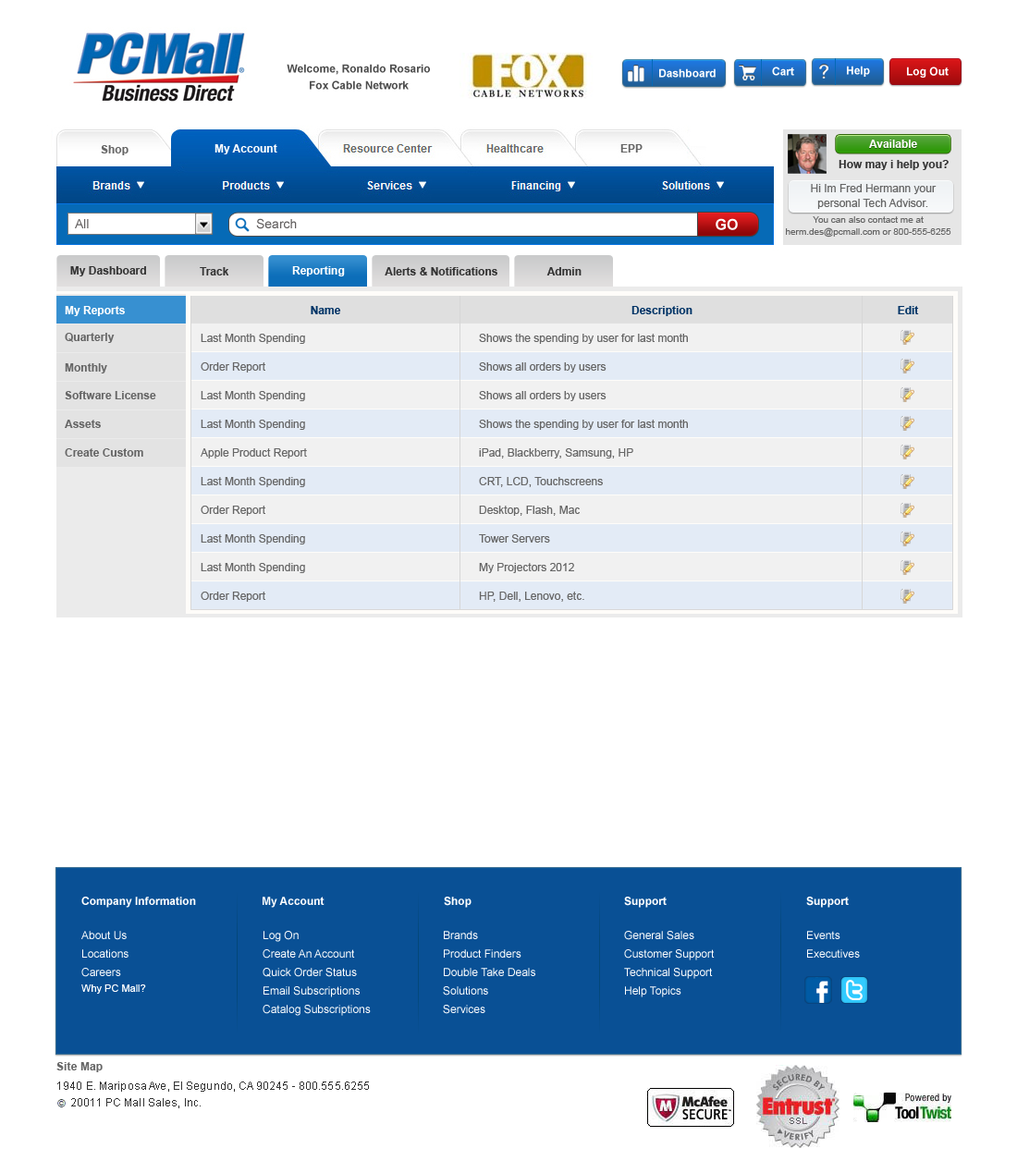
<style>
.page{position:relative;width:1017px;height:1173px;background:#ffffff}
.page>*{position:absolute;margin:0}
.t1{font:11.1px/16.6px "Arial-BoldMT";color:#4e4e4e}
.t2{font:11.1px "Arial-BoldMT";color:#feffff}
.t3{font:11.1px "Arial-BoldMT";color:#fffefe}
.t4{font:11.1px "Arial-BoldMT";color:#333333}
.t5{font:11.1px/14.8px "ArialMT";color:#666666}
.t6{font:12.9px "ArialMT";color:#625f5f}
.t7{font:14.8px "Arial-BoldMT";color:#ffffff}
.t8{font:9.2px/12px "ArialMT";color:#666666}
.t9{font:11.1px "Arial-BoldMT";color:#ffffff}
.t10{font:11.1px "Arial-BoldMT";color:#003366}
.t11{font:11.1px "ArialMT";color:#666666}
.t12{font:11.1px/18.5px "ArialMT";color:#ffffff}
.t13{font:10.2px "ArialMT";color:#ffffff}
.t14{font:11.1px "Arial-BoldMT";letter-spacing:0.01em;color:#666666}
.t15{font:11.1px "ArialMT";letter-spacing:0.01em;color:#333333}
</style>
<div class="page">
<p class="t1" style="left:287px;top:64px;width:143px;height:26px;text-align:center">Welcome, Ronaldo Rosario <br>Fox Cable Network</p>
<p class="t2" style="left:847px;top:66px;width:23px;height:11px">Help</p>
<p class="t2" style="left:659px;top:68px;width:56px;height:10px">Dashboard</p>
<p class="t2" style="left:772px;top:67px;width:22px;height:9px">Cart</p>
<p class="t2" style="left:907px;top:67px;width:41px;height:11px">Log Out</p>
<p class="t3" style="left:869px;top:140px;width:48px;height:8px">Available</p>
<p class="t4" style="left:838px;top:160px;width:110px;height:10px">How may i help you?</p>
<p class="t5" style="left:811px;top:184px;width:125px;height:25px;text-align:center">Hi Im Fred Hermann your personal Tech Advisor.</p>
<p class="t6" style="left:75px;top:219px;width:14px;height:9px">All</p>
<p class="t6" style="left:256px;top:218px;width:41px;height:11px">Search</p>
<p class="t7" style="left:715px;top:218px;width:23px;height:12px">GOv</p>
<p class="t8" style="left:786px;top:216px;width:165px;height:22px;text-align:center">You can also contact me at herm.des@pcmall.com or 800-555-6255</p>
<p class="t4" style="left:70px;top:266px;width:76px;height:10px">My Dashboard</p>
<p class="t4" style="left:200px;top:267px;width:29px;height:8px">Track</p>
<p class="t9" style="left:292px;top:266px;width:53px;height:10px">Reporting</p>
<p class="t4" style="left:384px;top:267px;width:113px;height:8px">Alerts &amp; Notifications</p>
<p class="t4" style="left:546px;top:267px;width:35px;height:8px">Admin</p>
<p class="t10" style="left:311px;top:306px;width:30px;height:8px">Name</p>
<p class="t10" style="left:631px;top:306px;width:61px;height:10px">Description</p>
<p class="t10" style="left:897px;top:306px;width:22px;height:8px">Edit</p>
<p class="t11" style="left:201px;top:334px;width:104px;height:10px">Last Month Spending</p>
<p class="t11" style="left:479px;top:334px;width:209px;height:10px">Shows the spending by user for last month</p>
<p class="t11" style="left:201px;top:362px;width:64px;height:10px">Order Report</p>
<p class="t11" style="left:479px;top:362px;width:127px;height:10px">Shows all orders by users</p>
<p class="t11" style="left:201px;top:391px;width:104px;height:10px">Last Month Spending</p>
<p class="t11" style="left:479px;top:391px;width:127px;height:10px">Shows all orders by users</p>
<p class="t11" style="left:201px;top:420px;width:104px;height:10px">Last Month Spending</p>
<p class="t11" style="left:479px;top:420px;width:209px;height:10px">Shows the spending by user for last month</p>
<p class="t11" style="left:201px;top:448px;width:106px;height:10px">Apple Product Report</p>
<p class="t11" style="left:479px;top:448px;width:154px;height:10px">iPad, Blackberry, Samsung, HP</p>
<p class="t11" style="left:201px;top:477px;width:104px;height:10px">Last Month Spending</p>
<p class="t11" style="left:479px;top:477px;width:124px;height:10px">CRT, LCD, Touchscreens</p>
<p class="t11" style="left:201px;top:506px;width:64px;height:10px">Order Report</p>
<p class="t11" style="left:479px;top:506px;width:101px;height:10px">Desktop, Flash, Mac</p>
<p class="t11" style="left:201px;top:534px;width:104px;height:10px">Last Month Spending</p>
<p class="t11" style="left:479px;top:534px;width:71px;height:9px">Tower Servers</p>
<p class="t11" style="left:201px;top:563px;width:104px;height:10px">Last Month Spending</p>
<p class="t11" style="left:479px;top:563px;width:95px;height:10px">My Projectors 2012</p>
<p class="t11" style="left:201px;top:592px;width:64px;height:10px">Order Report</p>
<p class="t11" style="left:479px;top:592px;width:105px;height:10px">HP, Dell, Lenovo, etc.</p>
<p class="t9" style="left:81px;top:897px;width:115px;height:11px">Company Information</p>
<p class="t9" style="left:262px;top:897px;width:62px;height:11px">My Account</p>
<p class="t9" style="left:444px;top:897px;width:27px;height:11px">Shop</p>
<p class="t9" style="left:624px;top:897px;width:42px;height:11px">Support</p>
<p class="t9" style="left:806px;top:897px;width:42px;height:11px">Support</p>
<p class="t12" style="left:81px;top:931px;width:47px;height:46px">About Us<br>Locations<br>Careers</p>
<p class="t12" style="left:262px;top:931px;width:109px;height:85px">Log On<br>Create An Account<br>Quick Order Status<br>Email Subscriptions<br>Catalog Subscriptions</p>
<p class="t12" style="left:443px;top:931px;width:92px;height:83px">Brands<br>Product Finders<br>Double Take Deals<br>Solutions<br>Services</p>
<p class="t12" style="left:624px;top:931px;width:90px;height:66px">General Sales<br>Customer Support<br>Technical Support<br>Help Topics</p>
<p class="t12" style="left:807px;top:931px;width:53px;height:27px">Events<br>Executives</p>
<p class="t13" style="left:81px;top:984px;width:65px;height:10px">Why PC Mall?</p>
<p class="t14" style="left:56px;top:1062px;width:47px;height:10px">Site Map</p>
<p class="t15" style="left:57px;top:1081px;width:312px;height:11px">1940 E. Mariposa Ave, El Segundo, CA 90245 - 800.555.6255</p>
<p class="t15" style="left:71px;top:1098px;width:130px;height:10px">20011 PC Mall Sales, Inc.</p>
</div>
